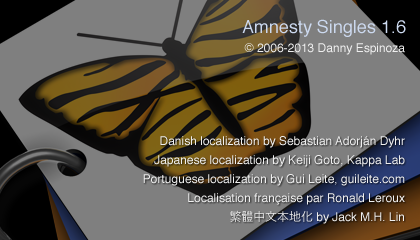
<style>
.page{position:relative;width:420px;height:240px;background:#7f7f7f}
.page>*{position:absolute;margin:0}
.t1{font:18px "Helvetica";color:#ccd9ef}
.t2{font:12px "Helvetica";color:#efefef}
.t3{font:12px/19px "Helvetica";color:#efefef}
.t4{font:12px/19px "HiraKakuProN-W3";color:#efefef}
</style>
<div class="page">
<p class="t1" style="left:242px;top:19px;width:164px;height:18px">Amnesty Singles 1.6</p>
<p class="t2" style="left:244px;top:43px;width:161px;height:12px">© 2006-2013 Danny Espinoza</p>
<p class="t3" style="left:143px;top:136px;width:262px;height:88px;text-align:right"><span class="t2"><br></span>Danish localization by Sebastian Adorján Dyhr<br>Japanese localization by Keiji Goto, Kappa Lab<br>Portuguese localization by Gui Leite, guileite.com<br>Localisation française par Ronald Leroux<br><span class="t4">繁體中文本地化</span> by Jack M.H. Lin</p>
</div>
